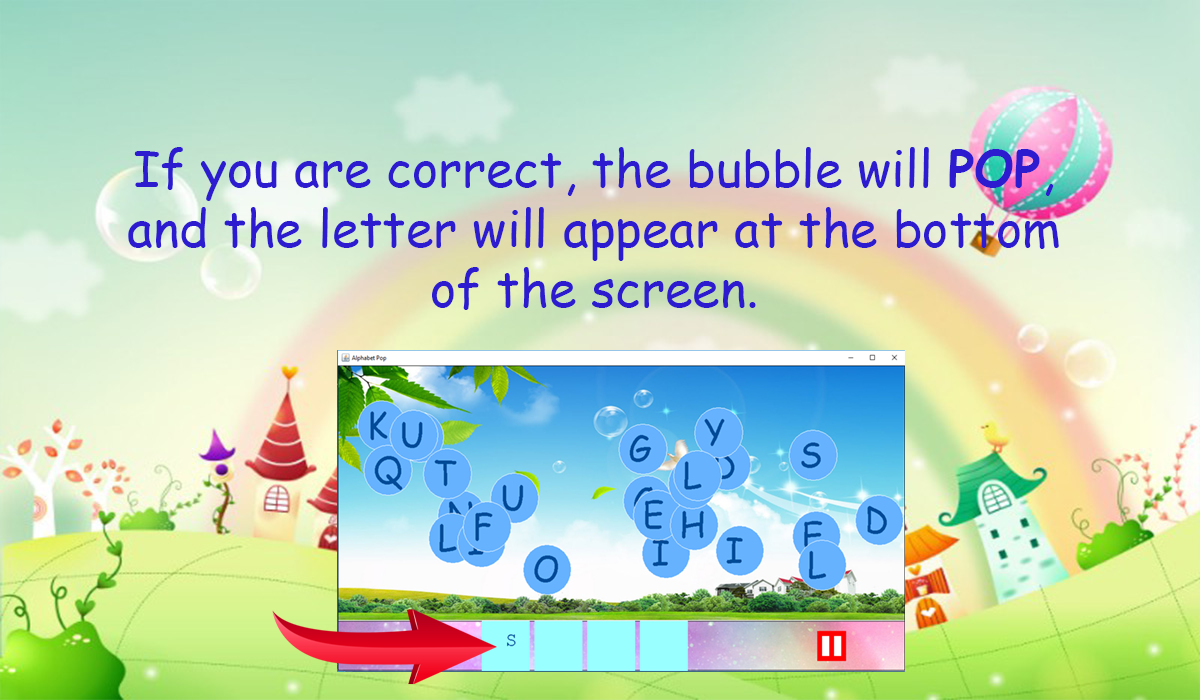
<style>
.page{position:relative;width:1200px;height:700px}
.page>*{position:absolute;margin:0}
.t1{font:12px "ComicSansMS";color:#2d1ccf}
.t2{font:12px "ComicSansMS-Bold";color:#2d1ccf}
</style>
<div class="page">
<p class="t1" style="left:128px;top:147px;width:931px;height:163px;text-align:center">If you are correct, the bubble will <span class="t2">POP</span>,<br>and the letter will appear at the bottom<br>of the screen.</p>
</div>
